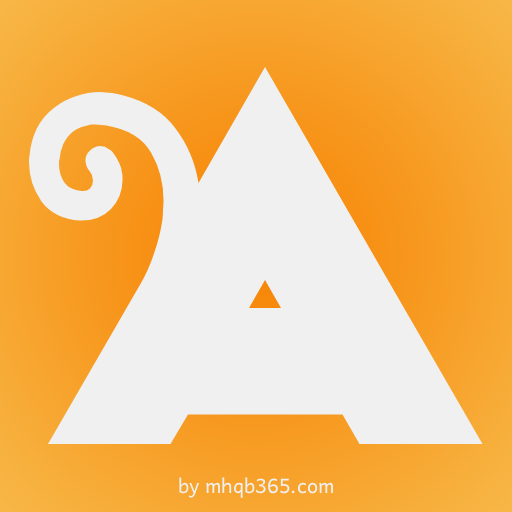
<style>
.page{position:relative;width:512px;height:512px;background:#f0f0f0}
.page>*{position:absolute;margin:0}
.t1{font:500px "Anagram";color:#f0f0f0}
.t2{font:20px "Andika";color:#f0f0f0}
</style>
<div class="page">
<p class="t1" style="left:29px;top:67px;width:454px;height:377px">A</p>
<p class="t2" style="left:179px;top:477px;width:154px;height:21px">by mhqb365.com</p>
</div>
